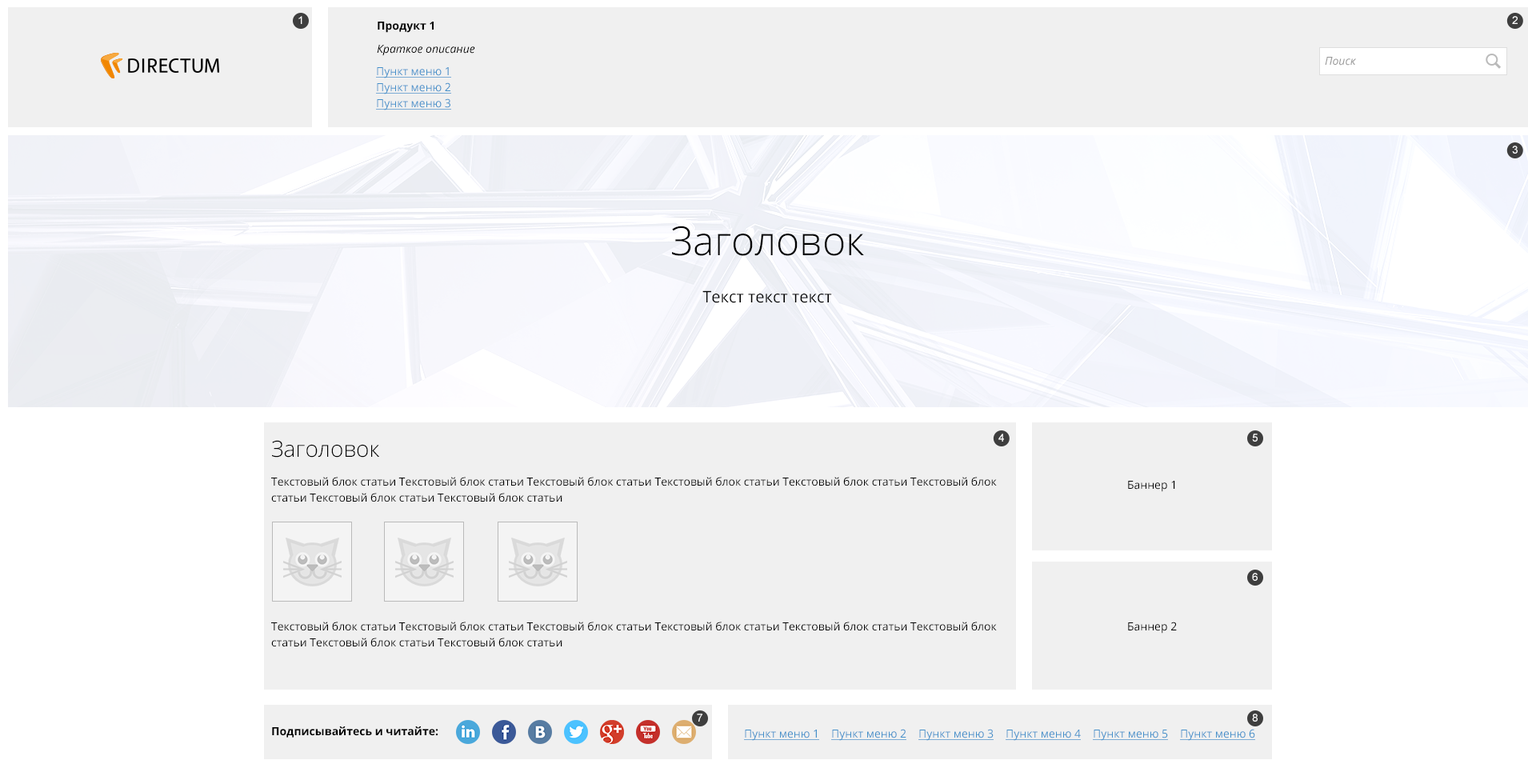
<style>
.page{position:relative;width:1536px;height:776px;background:#f0f0f0}
.page>*{position:absolute;margin:0}
.t1{font:11.2px "ArialMT";color:#ffffff}
.t2{font:11.2px "OpenSans-Bold";color:#000000}
.t3{font:11.2px "OpenSans-Italic";color:#000000}
.t4{font:11.2px "OpenSans-Italic";color:#969696}
.t5{font:11.2px/16px "OpenSans";color:#4490ca;text-decoration:underline}
.t6{font:40px "OpenSans-Light";color:#000000}
.t7{font:16px "OpenSans";color:#000000}
.t8{font:22.4px "OpenSans-Light";color:#000000}
.t9{font:11.2px/16px "OpenSans";color:#000000}
.t10{font:11.2px "OpenSans";color:#000000}
.t11{font:11.2px "OpenSans";color:#4490ca;text-decoration:underline}
</style>
<div class="page">
<p class="t1" style="left:298px;top:16px;width:4px;height:8px">1</p>
<p class="t1" style="left:1512px;top:16px;width:6px;height:8px">2</p>
<p class="t2" style="left:378px;top:22px;width:56px;height:11px">Продукт 1</p>
<p class="t3" style="left:377px;top:45px;width:98px;height:11px">Краткое описание</p>
<p class="t4" style="left:1325px;top:57px;width:31px;height:9px">Поиск</p>
<p class="t5" style="left:376px;top:67px;width:75px;height:43px">Пункт меню 1<br>Пункт меню 2<br>Пункт меню 3</p>
<p class="t1" style="left:1512px;top:146px;width:6px;height:8px">3</p>
<p class="t6" style="left:672px;top:226px;width:192px;height:30px">Заголовок</p>
<p class="t7" style="left:703px;top:290px;width:129px;height:13px">Текст текст текст</p>
<p class="t1" style="left:999px;top:434px;width:5px;height:8px">4</p>
<p class="t1" style="left:1252px;top:434px;width:6px;height:8px">5</p>
<p class="t8" style="left:272px;top:440px;width:107px;height:18px">Заголовок</p>
<p class="t9" style="left:271px;top:477px;width:726px;height:26px">Текстовый блок статьи Текстовый блок статьи Текстовый блок статьи Текстовый блок статьи Текстовый блок статьи Текстовый блок<br>статьи Текстовый блок статьи Текстовый блок статьи</p>
<p class="t10" style="left:1128px;top:481px;width:47px;height:11px">Баннер 1</p>
<p class="t1" style="left:1252px;top:573px;width:6px;height:8px">6</p>
<p class="t9" style="left:271px;top:622px;width:726px;height:25px">Текстовый блок статьи Текстовый блок статьи Текстовый блок статьи Текстовый блок статьи Текстовый блок статьи Текстовый блок<br>статьи Текстовый блок статьи Текстовый блок статьи</p>
<p class="t10" style="left:1128px;top:622px;width:49px;height:12px">Баннер 2</p>
<p class="t1" style="left:697px;top:714px;width:6px;height:8px">7</p>
<p class="t1" style="left:1252px;top:714px;width:6px;height:8px">8</p>
<p class="t2" style="left:272px;top:727px;width:166px;height:11px">Подписывайтесь и читайте:</p>
<p class="t11" style="left:744px;top:730px;width:75px;height:11px">Пункт меню 1</p>
<p class="t11" style="left:831px;top:729px;width:76px;height:12px">Пункт меню 2</p>
<p class="t11" style="left:919px;top:729px;width:75px;height:12px">Пункт меню 3</p>
<p class="t11" style="left:1006px;top:730px;width:75px;height:11px">Пункт меню 4</p>
<p class="t11" style="left:1093px;top:730px;width:75px;height:11px">Пункт меню 5</p>
<p class="t11" style="left:1180px;top:729px;width:75px;height:12px">Пункт меню 6</p>
</div>
